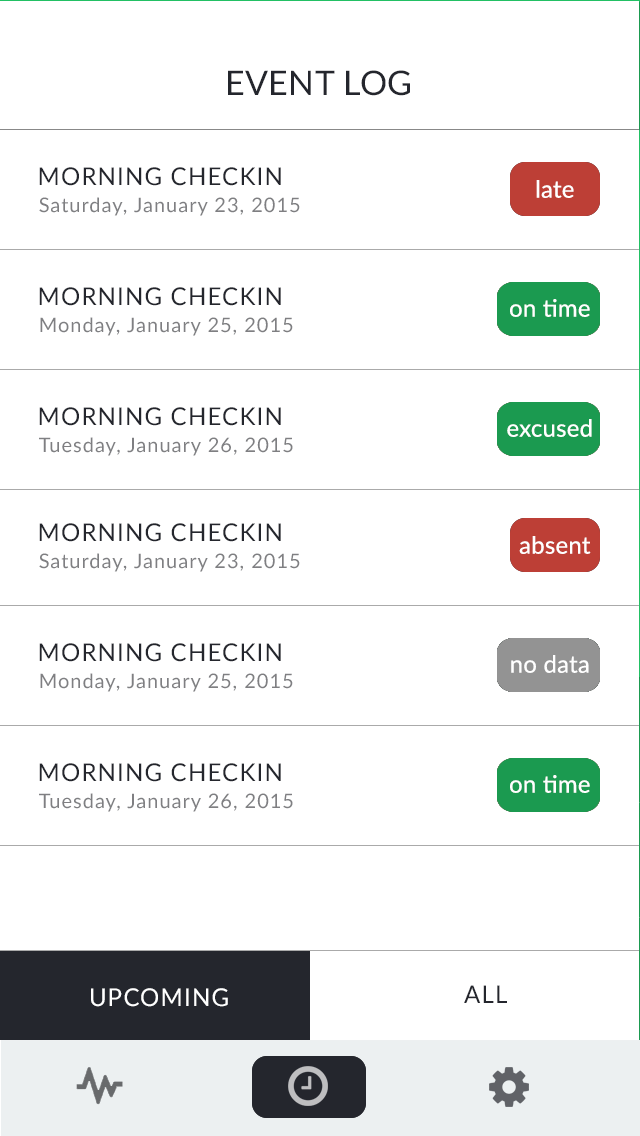
<style>
.page{position:relative;width:640px;height:1136px;background:#ffffff}
.page>*{position:absolute;margin:0}
.t1{font:34px "Lato-Regular";letter-spacing:0.01em;color:#24262d}
.t2{font:24px/120px "Lato-Regular";letter-spacing:0.05em;color:#24262d;text-transform:uppercase}
.t3{font:24px "Lato-Regular";letter-spacing:0.009em;color:#ffffff}
.t4{font:20px/120px "Lato-Regular";letter-spacing:0.05em;color:#7f7f82}
.t5{font:24px "Lato-Regular";letter-spacing:0.05em;color:#ffffff;text-transform:uppercase}
.t6{font:24px "Lato-Regular";letter-spacing:0.05em;color:#24262d;text-transform:uppercase}
</style>
<div class="page">
<p class="t1" style="left:228px;top:70px;width:182px;height:26px">EVENT LOG</p>
<p class="t2" style="left:39px;top:167px;width:242px;height:259px">MORNING CHECKIN<br>MORNING CHECKIN<br>MORNING CHECKIN</p>
<p class="t3" style="left:536px;top:180px;width:38px;height:18px">late</p>
<p class="t4" style="left:39px;top:197px;width:261px;height:259px">Saturday, January 23, 2015<br>Monday, January 25, 2015<br>Tuesday, January 26, 2015</p>
<p class="t3" style="left:510px;top:299px;width:80px;height:18px">on time</p>
<p class="t3" style="left:507px;top:419px;width:85px;height:18px">excused</p>
<p class="t2" style="left:39px;top:523px;width:242px;height:259px">MORNING CHECKIN<br>MORNING CHECKIN<br>MORNING CHECKIN</p>
<p class="t3" style="left:519px;top:536px;width:72px;height:18px">absent</p>
<p class="t4" style="left:39px;top:553px;width:261px;height:259px">Saturday, January 23, 2015<br>Monday, January 25, 2015<br>Tuesday, January 26, 2015</p>
<p class="t3" style="left:511px;top:655px;width:78px;height:18px">no data</p>
<p class="t3" style="left:510px;top:775px;width:80px;height:18px">on time</p>
<p class="t5" style="left:91px;top:988px;width:137px;height:19px">UPCOMING</p>
<p class="t6" style="left:464px;top:985px;width:43px;height:18px">ALL</p>
</div>
